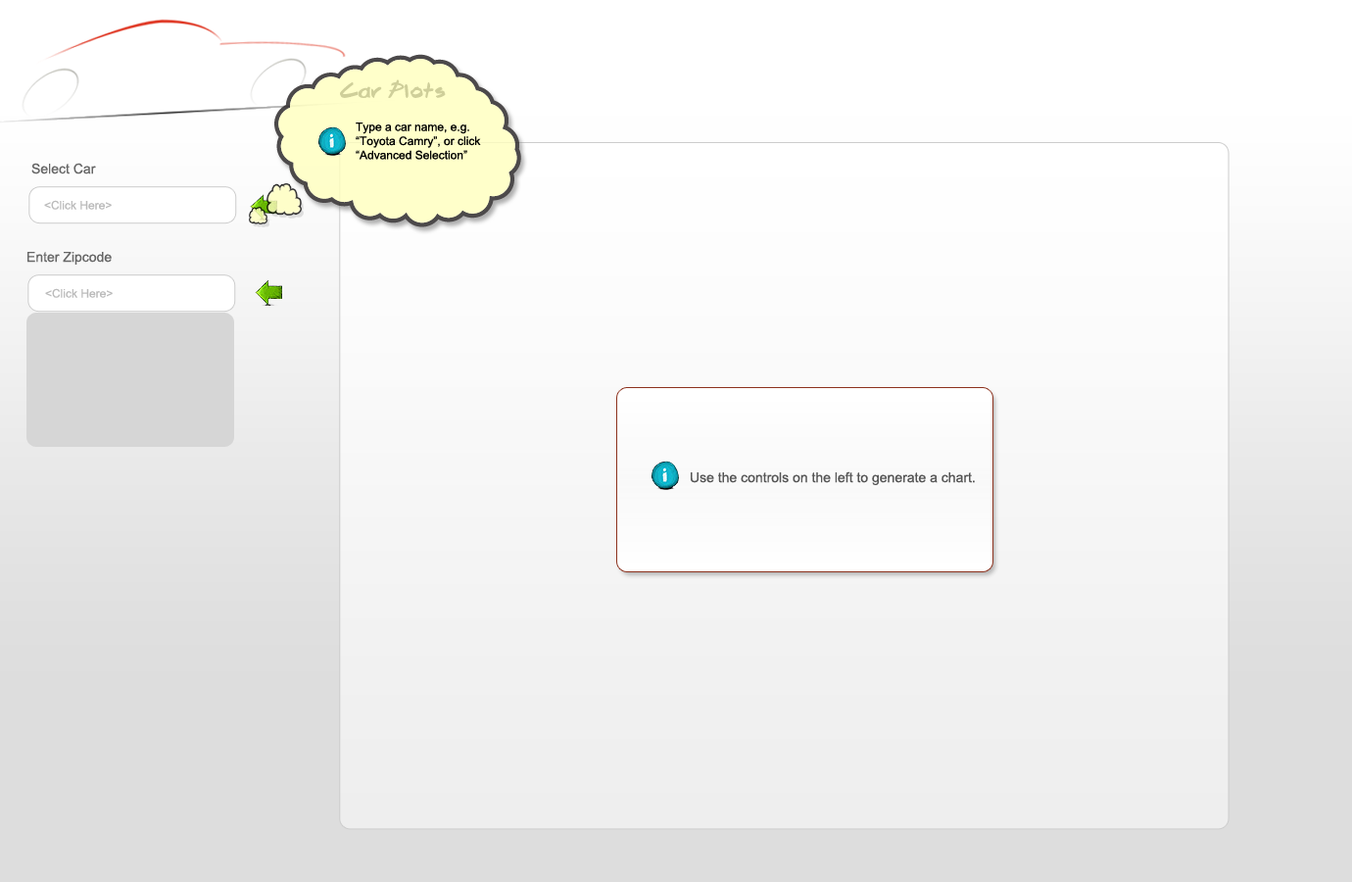
<style>
.page{position:relative;width:1352px;height:882px}
.page>*{position:absolute;margin:0}
.t1{font:23.5px "Brook23";color:#cfcf9a}
.t2{font:11.8px "ArialMT";color:#000000}
.t3{font:13.7px "ArialMT";color:#666666}
.t4{font:11.8px "ArialMT";color:#bbbbbb}
.t5{font:13.7px "ArialMT";color:#555555}
</style>
<div class="page">
<p class="t1" style="left:340px;top:79px;width:106px;height:19px">Car Plots</p>
<p class="t2" style="left:356px;top:122px;width:125px;height:38px">Type a car name, e.g. <br>“Toyota Camry”, or click <br>“Advanced Selection”</p>
<p class="t3" style="left:31px;top:163px;width:65px;height:11px">Select Car</p>
<p class="t4" style="left:44px;top:200px;width:68px;height:10px">&lt;Click Here&gt;</p>
<p class="t3" style="left:27px;top:252px;width:85px;height:13px">Enter Zipcode</p>
<p class="t4" style="left:45px;top:288px;width:68px;height:10px">&lt;Click Here&gt;</p>
<p class="t5" style="left:691px;top:471px;width:284px;height:14px">Use the controls on the left to generate a chart.</p>
</div>
